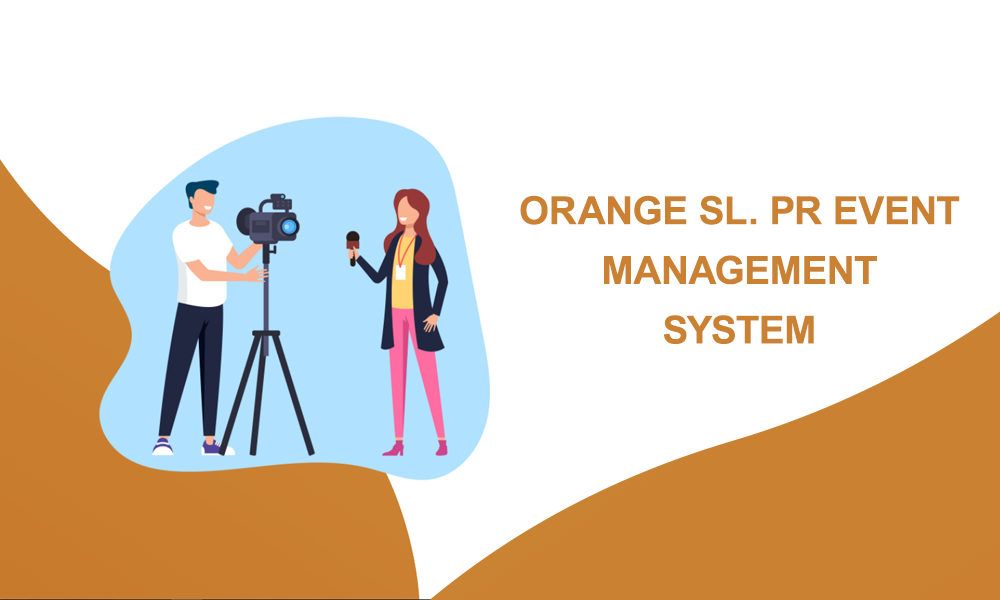
<style>
.page{position:relative;width:1000px;height:600px;background:#ffffff}
.page>*{position:absolute;margin:0}
.t1{font:38.6px/59.7px "Arial-BoldMT";color:#ca8232}
</style>
<div class="page">
<p class="t1" style="left:520px;top:195px;width:440px;height:149px;text-align:center">ORANGE SL. PR EVENT<br>MANAGEMENT<br>SYSTEM</p>
</div>
